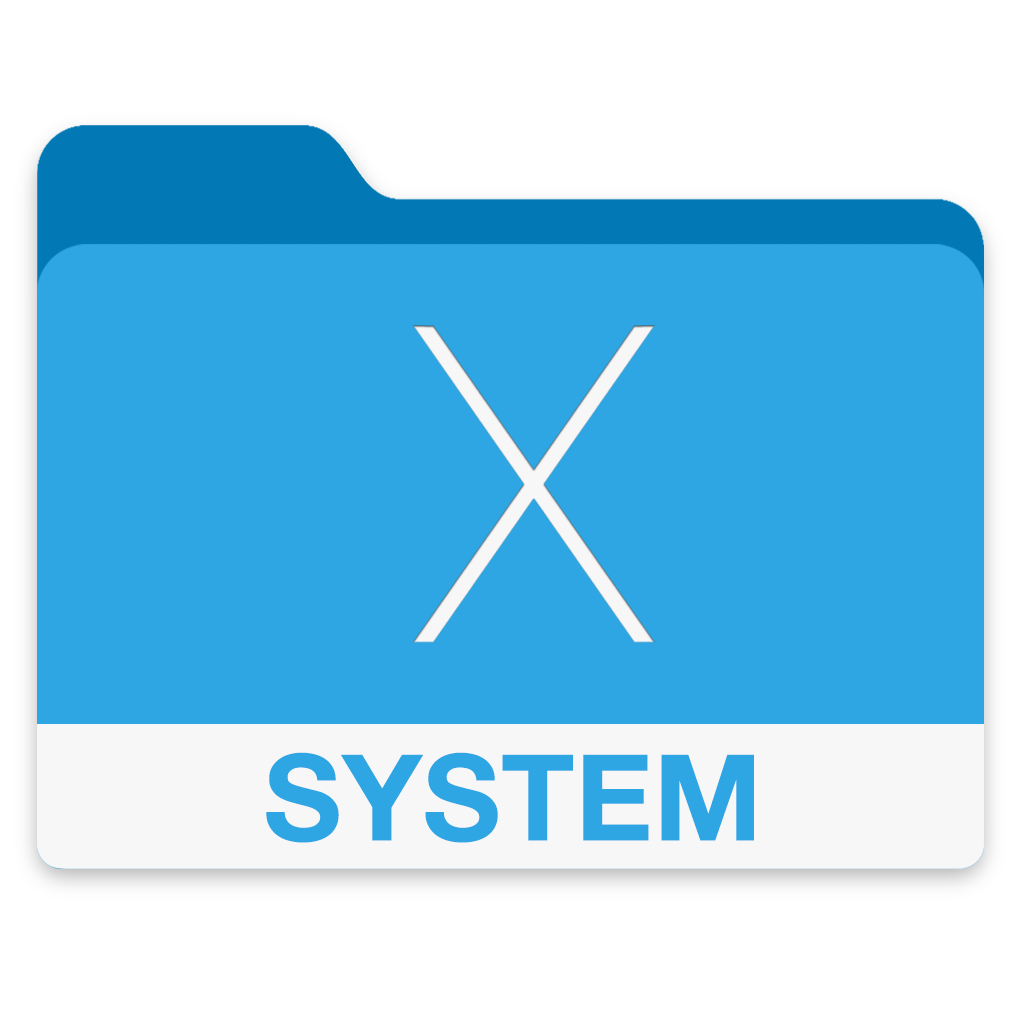
<style>
.page{position:relative;width:1024px;height:1024px;background:#2ea6e4}
.page>*{position:absolute;margin:0}
.t1{font:120px "HelveticaNeue-Bold";letter-spacing:0.005em;color:#2ea6e4}
</style>
<div class="page">
<p class="t1" style="left:266px;top:752px;width:488px;height:91px">SYSTEM</p>
</div>
